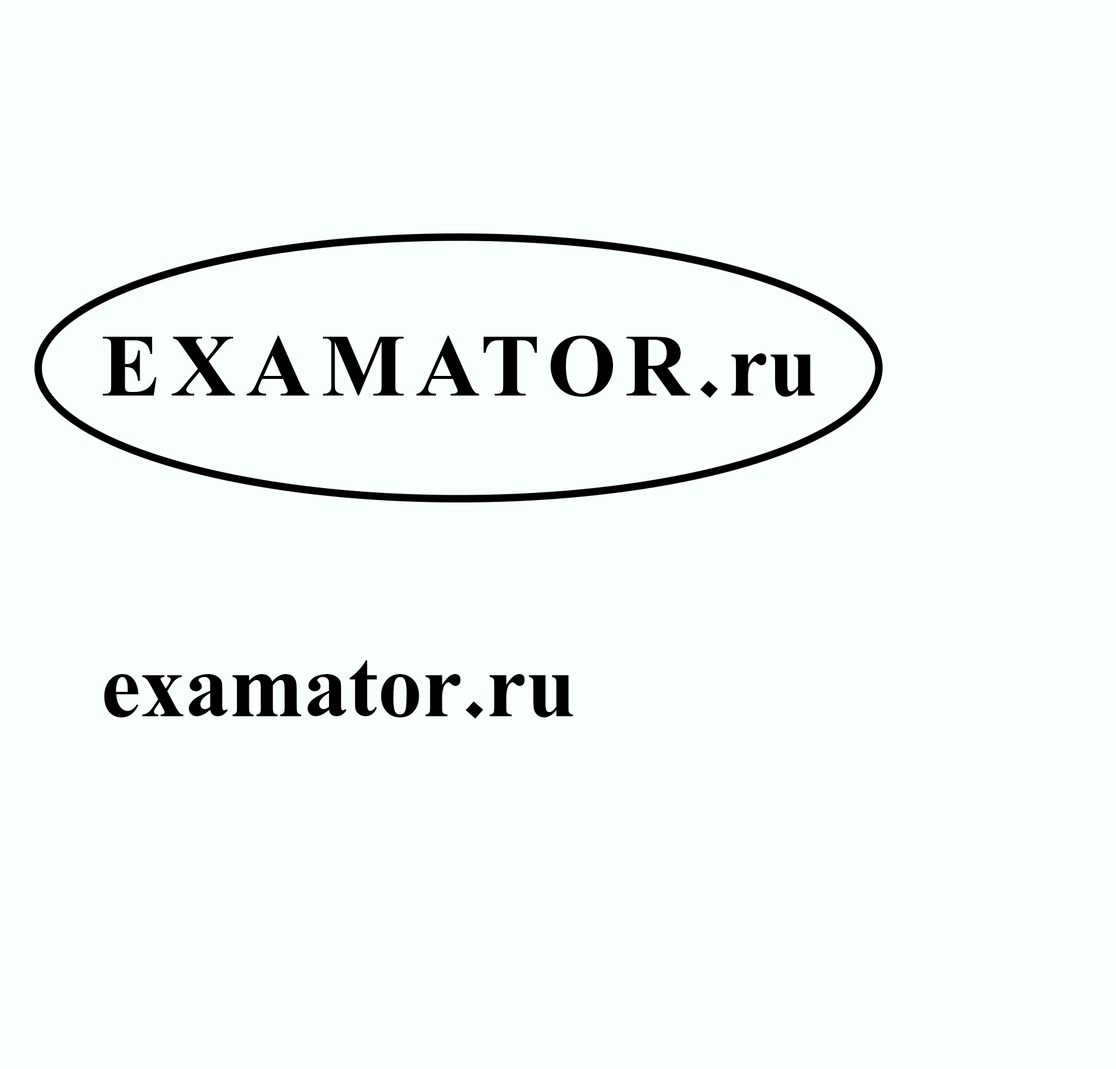
<style>
.page{position:relative;width:1116px;height:1069px;background:#f9fffd}
.page>*{position:absolute;margin:0}
.t1{font:89.1px "David-Bold";color:#000000}
</style>
<div class="page">
<p class="t1" style="left:103px;top:335px;width:712px;height:383px">EXAMATOR.ru<br><br><br>examator.ru</p>
</div>
